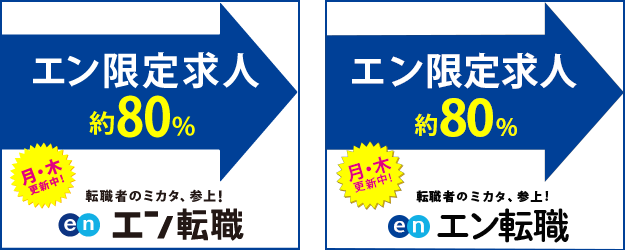
<style>
.page{position:relative;width:625px;height:250px;background:#ffffff}
.page>*{position:absolute;margin:0}
.t1{font:38px "KozGoPr6N-Bold";color:#ffffff}
.t2{font:50px "KozGoPr6N-Bold";letter-spacing:0.025em;color:#ffff00}
.t3{font:24px "KozGoPr6N-Bold";letter-spacing:0.025em;color:#ffff00}
.t4{font:11px/18px "KozGoPr6N-Medium";letter-spacing:0.1em;color:#e3007f}
.t5{font:18px/18px "KozGoPr6N-Bold";letter-spacing:-0.25em;color:#e3007f}
.t6{font:12px "KozGoPr6N-Heavy";letter-spacing:0.1em;color:#040404}
.t7{font:36px "DNPShueiMGoStd-B";letter-spacing:-0.025em;color:#040404}
.t8{font:19.6px "KozGoPr6N-Regular";color:#ffffff;font-weight:bold;scale:1.18 1}
</style>
<div class="page">
<p class="t1" style="left:352px;top:52px;width:225px;height:37px">エン限定求人</p>
<p class="t2" style="left:414px;top:98px;width:103px;height:39px"><span class="t3">約</span>80<span class="t3">%</span></p>
<p class="t4" style="left:348px;top:156px;width:45px;height:37px;text-align:center;rotate:-16deg"><span class="t5">月・木<br></span>更新中!</p>
<p class="t6" style="left:416px;top:190px;width:133px;height:13px">転職者のミカタ、参上!</p>
<p class="t7" style="left:437px;top:208px;width:132px;height:35px">エン転職</p>
<p class="t8" style="left:394px;top:221px;width:11px;height:12px">e</p>
<p class="t8" style="left:413px;top:221px;width:11px;height:12px">n</p>
</div>
